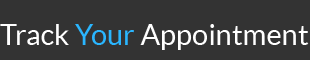
<style>
.page{position:relative;width:310px;height:60px;background:#333333}
.page>*{position:absolute;margin:0}
.t1{font:29px "Lato-Regular";color:#ffffff}
.t2{font:29px "Lato-Regular";color:#2ab6ff}
</style>
<div class="page">
<p class="t1" style="left:0px;top:24px;width:309px;height:26px">Track <span class="t2">Your </span>Appointment</p>
</div>
